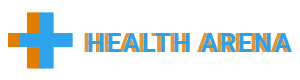
<style>
.page{position:relative;width:300px;height:80px;background:#ffffff}
.page>*{position:absolute;margin:0}
.t1{font:108px "Roboto-Bold";letter-spacing:0.32em}
.t2{font:108px "Roboto-Bold";letter-spacing:0.32em;color:#2da2ed}
.t3{font:26px "Roboto-Bold";letter-spacing:0.06em;color:#2ca2ec}
</style>
<div class="page">
<p class="t1" style="left:8px;top:12px;width:53px;height:57px">+</p>
<p class="t2" style="left:20px;top:12px;width:53px;height:57px">+</p>
<p class="t3" style="left:88px;top:33px;width:204px;height:19px">HEALTH ARENA</p>
</div>
